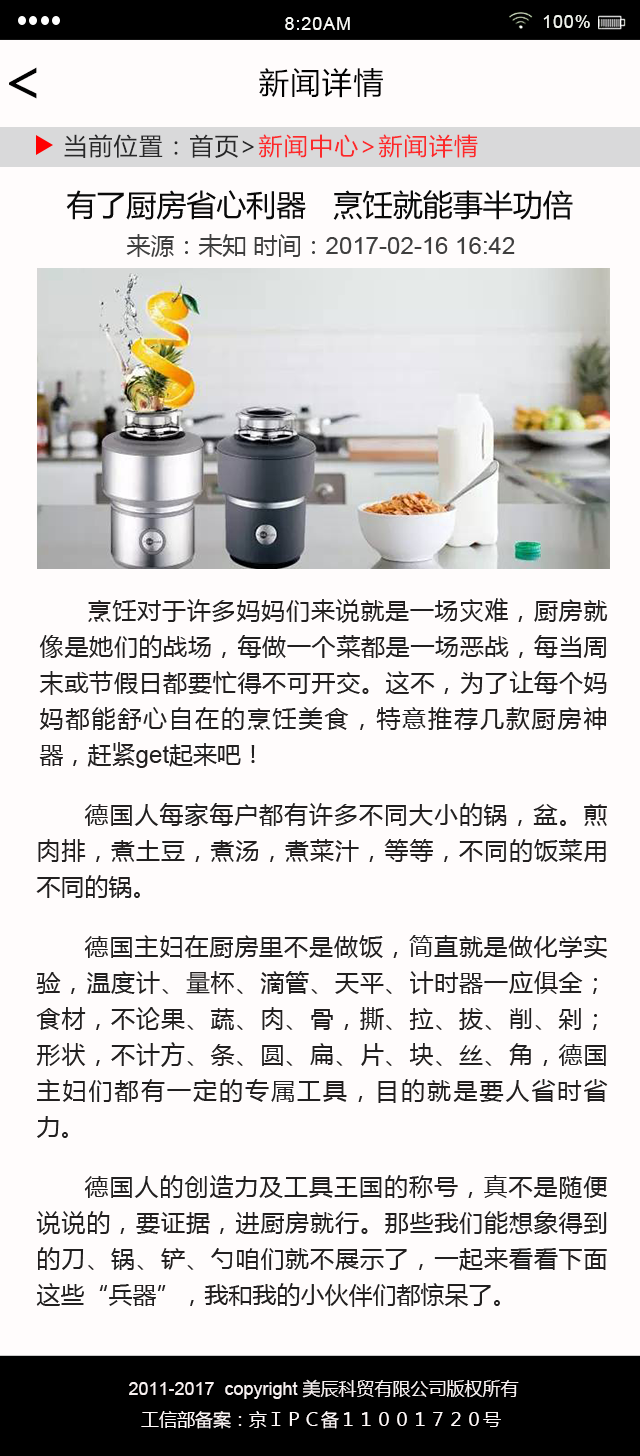
<style>
.page{position:relative;width:640px;height:1456px;background:#fffcfc}
.page>*{position:absolute;margin:0}
.t1{font:18px "ArialMT";letter-spacing:0.05em;color:#f9faf7}
.t2{font:18px "ArialMT";letter-spacing:0.05em;color:#f1f4ee}
.t3{font:60px "MicrosoftYaHei";letter-spacing:0.05em;color:#020202}
.t4{font:30px "MicrosoftYaHei";letter-spacing:0.05em;color:#020202}
.t5{font:24px "MicrosoftYaHei";letter-spacing:0.05em}
.t6{font:30px "MicrosoftYaHei";color:#0a0a0a}
.t7{font:24px "ArialMT";color:#3f3f3f}
.t8{font:24px "MicrosoftYaHei";color:#3f3f3f}
.t9{font:24px/36px "MicrosoftYaHei";color:#222020}
.t10{font:24px/36px "ArialMT";color:#222020}
.t11{font:18px/3px "ArialMT";color:#f8f1f1}
.t12{font:18px/3px "MicrosoftYaHei";color:#f8f1f1}
.t13{font:18px/31px "MicrosoftYaHei";color:#fff9f9}
</style>
<div class="page">
<p class="t1" style="left:285px;top:17px;width:65px;height:13px">8:20AM</p>
<p class="t2" style="left:543px;top:15px;width:47px;height:13px">100%</p>
<p class="t3" style="left:9px;top:67px;width:28px;height:32px">&lt;</p>
<p class="t4" style="left:259px;top:68px;width:124px;height:30px">新闻详情</p>
<p class="t5" style="left:64px;top:134px;width:414px;height:24px">当前位置：首页&gt;新闻中心&gt;新闻详情</p>
<p class="t6" style="left:66px;top:190px;width:507px;height:30px">有了厨房省心利器   烹饪就能事半功倍</p>
<p class="t7" style="left:126px;top:234px;width:389px;height:23px"><span class="t8">来源：未知 时间：</span>2017-02-16 16:42</p>
<p class="t9" style="left:36px;top:598px;width:572px;height:709px;text-align:justify">烹饪对于许多妈妈们来说就是一场灾难，厨房就像是她们的战场，每做一个菜都是一场恶战，每当周末或节假日都要忙得不可开交。这不，为了让每个妈妈都能舒心自在的烹饪美食，特意推荐几款厨房神器，赶紧<span class="t10">get</span>起来吧！<br>德国人每家每户都有许多不同大小的锅，盆。煎肉排，煮土豆，煮汤，煮菜汁，等等，不同的饭菜用不同的锅。<br>德国主妇在厨房里不是做饭，简直就是做化学实验，温度计、量杯、滴管、天平、计时器一应俱全；食材，不论果、蔬、肉、骨，撕、拉、拔、削、剁；形状，不计方、条、圆、扁、片、块、丝、角，德国主妇们都有一定的专属工具，目的就是要人省时省力。<br>德国人的创造力及工具王国的称号，真不是随便说说的，要证据，进厨房就行。那些我们能想象得到的刀、锅、铲、勺咱们就不展示了，一起来看看下面这些“兵器”，我和我的小伙伴们都惊呆了。</p>
<p class="t11" style="left:129px;top:1379px;width:390px;height:50px;text-align:justify">2011-2017  copyright <span class="t12">美辰科贸有限公司版权所有<br></span><span class="t13">工信部备案：京ＩＰＣ备１１００１７２０号</span></p>
</div>
